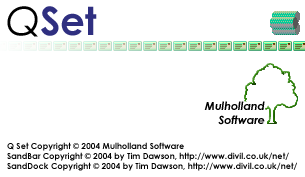
<style>
.page{position:relative;width:305px;height:177px;background:#ffffff}
.page>*{position:absolute;margin:0}
.t1{font:8.3px "CenturyGothic-Bold";color:#000000}
</style>
<div class="page">
<p class="t1" style="left:7px;top:142px;width:290px;height:29px">Q Set Copyright © 2004 Mulholland Software<br>SandBar Copyright © 2004 by Tim Dawson, http://www.divil.co.uk/net/<br>SandDock Copyright © 2004 by Tim Dawson, http://www.divil.co.uk/net/</p>
</div>
